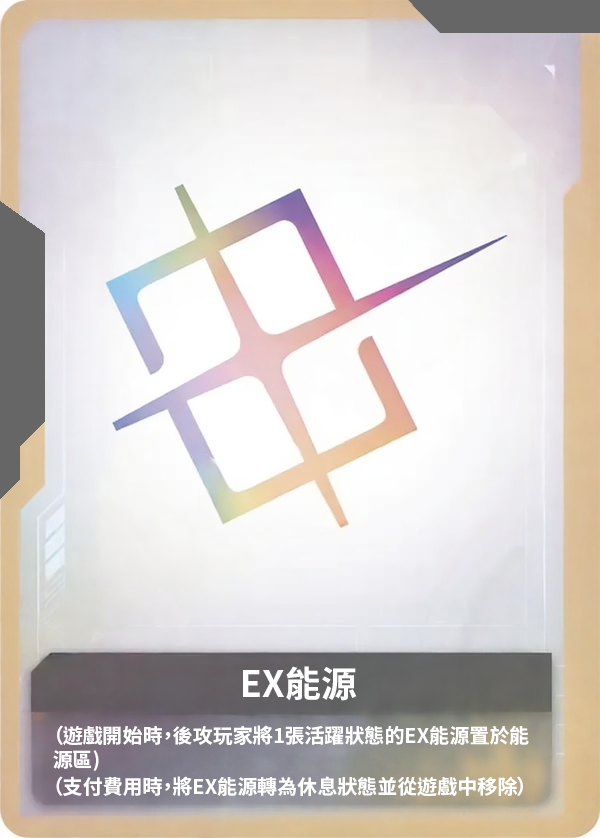
<style>
.page{position:relative;width:600px;height:838px}
.page>*{position:absolute;margin:0}
.t1{font:36px "NotoSansCJKtc-Bold";color:#ffffff}
.t2{font:20px "NotoSansCJKtc-Bold";color:#ffffff}
</style>
<div class="page">
<p class="t1" style="left:243px;top:666px;width:114px;height:35px">EX能源</p>
<p class="t2" style="left:53px;top:725px;width:476px;height:46px">（遊戲開始時，後攻玩家將1張活躍狀態的EX能源置於能<br>源區)</p>
<p class="t2" style="left:56px;top:776px;width:467px;height:21px">（支付費用時，將EX能源轉為休息狀態並從遊戲中移除）</p>
</div>
